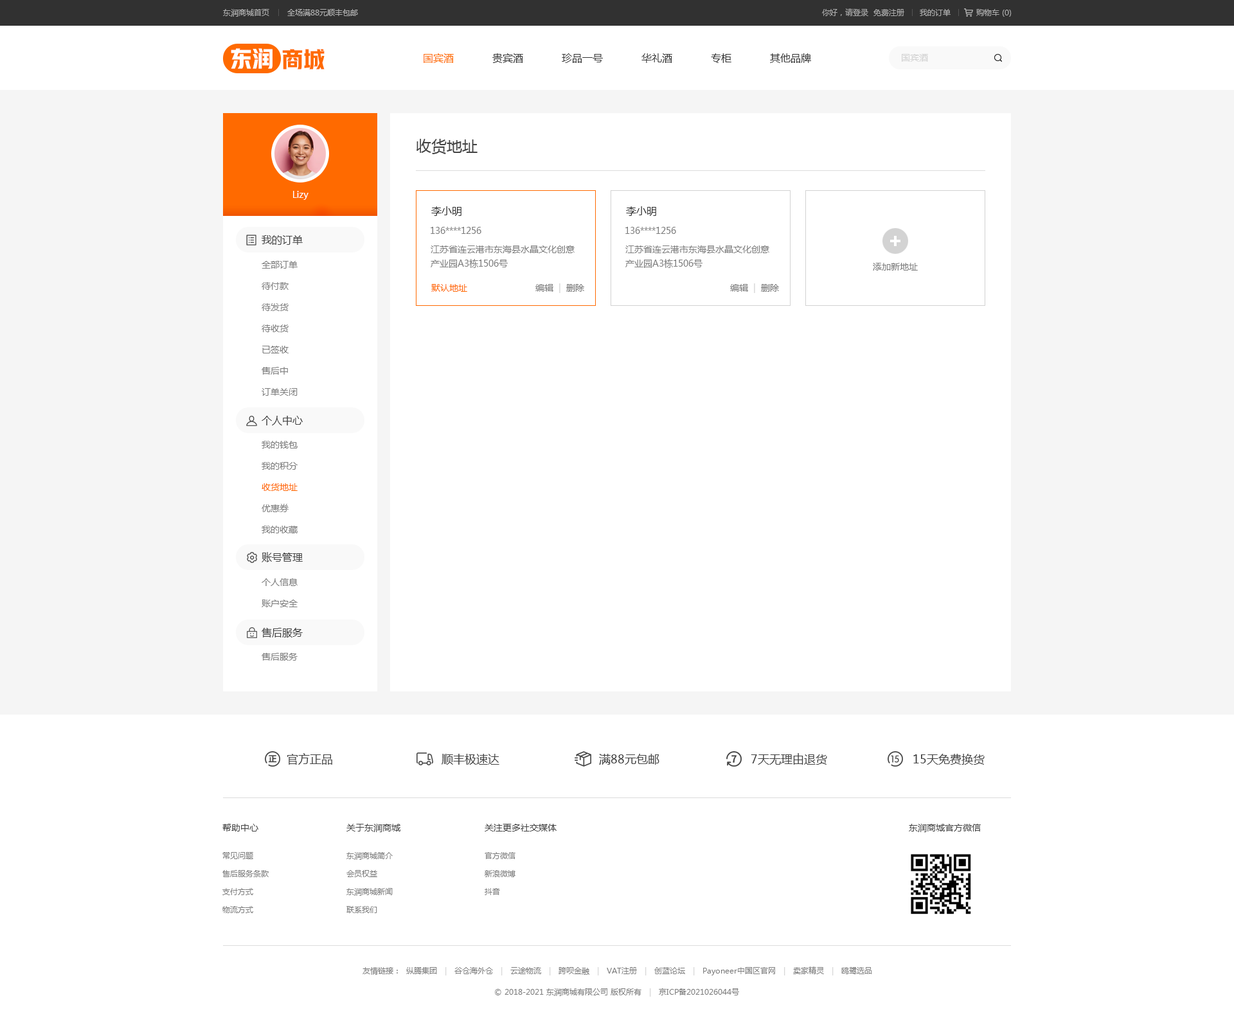
<style>
.page{position:relative;width:1234px;height:1023px;background:#ffffff}
.page>*{position:absolute;margin:0}
.t1{font:7.7px "MicrosoftYaHei";color:#b0b0b0}
.t2{font:7.7px "MicrosoftYaHei";color:#acacac}
.t3{font:21.9px "HYYakuHei-HEW";color:#ffffff}
.t4{font:21.9px "HYYakuHei-HEW";color:#ff6a00}
.t5{font:10.3px "MicrosoftYaHei";color:#333333}
.t6{font:10.3px "MicrosoftYaHei";color:#ff6a00}
.t7{font:9px "MicrosoftYaHei";color:#d2d2d2}
.t8{font:15.4px "MicrosoftYaHei";color:#434343}
.t9{font:9px "MicrosoftYaHei";color:#ffffff}
.t10{font:10.3px "MicrosoftYaHei";color:#313131}
.t11{font:9px "MicrosoftYaHei";color:#7d7d7d}
.t12{font:10.3px "MicrosoftYaHei";color:#434343}
.t13{font:9px/14.1px "MicrosoftYaHei";color:#7d7d7d}
.t14{font:9px/21.2px "MicrosoftYaHei";color:#7d7d7d}
.t15{font:9px "MicrosoftYaHei";color:#ff6a00}
.t16{font:9px/21.2px "MicrosoftYaHei";color:#ff6a00}
.t17{font:11.6px "MicrosoftYaHei";color:#434343}
.t18{font:9px "MicrosoftYaHei";color:#434343}
.t19{font:7.7px/18px "MicrosoftYaHei";color:#7d7d7d}
.t20{font:7.7px "MicrosoftYaHei";color:#7d7d7d}
.t21{font:7.7px "MicrosoftYaHei";color:#d2d2d2}
</style>
<div class="page">
<p class="t1" style="left:223px;top:9px;width:135px;height:8px">东润商城首页       全场满88元顺丰包邮</p>
<p class="t2" style="left:822px;top:8px;width:190px;height:9px">你好，请登录  免费注册      我的订单          购物车 (0)</p>
<p class="t3" style="left:231px;top:48px;width:42px;height:21px">东润</p>
<p class="t4" style="left:282px;top:49px;width:43px;height:20px">商城</p>
<p class="t5" style="left:424px;top:53px;width:387px;height:10px"><span class="t6">国宾酒</span>            贵宾酒            珍品一号            华礼酒            专柜            其他品牌</p>
<p class="t7" style="left:902px;top:54px;width:26px;height:8px">国宾酒</p>
<p class="t8" style="left:417px;top:139px;width:61px;height:15px">收货地址</p>
<p class="t9" style="left:293px;top:191px;width:16px;height:9px">Lizy</p>
<p class="t10" style="left:431px;top:206px;width:31px;height:10px">李小明</p>
<p class="t10" style="left:626px;top:206px;width:30px;height:10px">李小明</p>
<p class="t11" style="left:431px;top:227px;width:51px;height:7px">136****1256</p>
<p class="t11" style="left:626px;top:227px;width:50px;height:7px">136****1256</p>
<p class="t12" style="left:262px;top:235px;width:41px;height:10px">我的订单</p>
<p class="t13" style="left:431px;top:246px;width:144px;height:22px">江苏省连云港市东海县水晶文化创意<br>产业园A3栋1506号</p>
<p class="t13" style="left:626px;top:246px;width:144px;height:22px">江苏省连云港市东海县水晶文化创意<br>产业园A3栋1506号</p>
<p class="t14" style="left:262px;top:261px;width:36px;height:135px">全部订单<br>待付款<br>待发货<br>待收货<br>已签收<br>售后中<br>订单关闭</p>
<p class="t11" style="left:873px;top:263px;width:45px;height:8px">添加新地址</p>
<p class="t15" style="left:431px;top:284px;width:36px;height:8px">默认地址</p>
<p class="t11" style="left:536px;top:284px;width:48px;height:9px">编辑 <span class="t7"> |</span>  删除</p>
<p class="t11" style="left:730px;top:284px;width:49px;height:9px">编辑 <span class="t7"> |</span>  删除</p>
<p class="t12" style="left:262px;top:416px;width:41px;height:10px">个人中心</p>
<p class="t14" style="left:262px;top:441px;width:36px;height:93px">我的钱包<br>我的积分<br><span class="t16">收货地址<br></span>优惠券<br>我的收藏</p>
<p class="t12" style="left:262px;top:552px;width:41px;height:10px">账号管理</p>
<p class="t14" style="left:262px;top:579px;width:36px;height:29px">个人信息<br>账户安全</p>
<p class="t12" style="left:262px;top:628px;width:41px;height:10px">售后服务</p>
<p class="t11" style="left:262px;top:653px;width:36px;height:8px">售后服务</p>
<p class="t17" style="left:287px;top:753px;width:45px;height:12px">官方正品</p>
<p class="t17" style="left:442px;top:754px;width:58px;height:11px">顺丰极速达</p>
<p class="t17" style="left:599px;top:754px;width:61px;height:11px">满88元包邮</p>
<p class="t17" style="left:751px;top:753px;width:76px;height:12px">7天无理由退货</p>
<p class="t17" style="left:914px;top:754px;width:71px;height:11px">15天免费换货</p>
<p class="t18" style="left:222px;top:824px;width:36px;height:8px">帮助中心</p>
<p class="t18" style="left:346px;top:824px;width:55px;height:9px">关于东润商城</p>
<p class="t18" style="left:485px;top:824px;width:72px;height:8px">关注更多社交媒体</p>
<p class="t18" style="left:909px;top:824px;width:72px;height:9px">东润商城官方微信</p>
<p class="t19" style="left:222px;top:852px;width:47px;height:62px">常见问题<br>售后服务条款<br>支付方式<br>物流方式</p>
<p class="t19" style="left:346px;top:852px;width:47px;height:62px">东润商城简介<br>会员权益<br>东润商城新闻<br>联系我们</p>
<p class="t19" style="left:485px;top:852px;width:31px;height:44px">官方微信<br>新浪微博<br>抖音</p>
<p class="t20" style="left:363px;top:967px;width:509px;height:9px">友情链接：  纵腾集团   <span class="t21">|   </span>谷仓海外仓   <span class="t21">|   </span>云途物流   <span class="t21">|   </span>跨呗金融   <span class="t21">|   </span>VAT注册   <span class="t21">|   </span>创蓝论坛   <span class="t21">|   </span>Payoneer中国区官网   <span class="t21">|   </span>卖家精灵   <span class="t21">|   </span>鸥鹭选品</p>
<p class="t20" style="left:495px;top:989px;width:244px;height:8px">© 2018-2021 东润商城有限公司 版权所有   <span class="t21">|   </span>京ICP备2021026044号</p>
</div>
